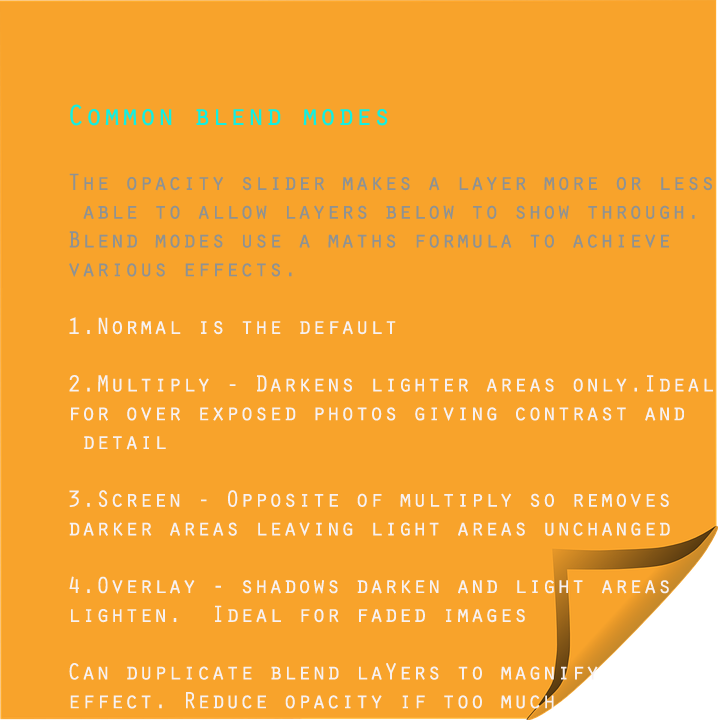
<style>
.page{position:relative;width:718px;height:720px;background:#f8a32b}
.page>*{position:absolute;margin:0}
.t1{font:24px "OratorStd";color:#f7f1f1}
.t2{font:30px "OratorStd";color:#12efe2}
.t3{font:24px "OratorStd";color:#8e9293}
</style>
<div class="page">
<p class="t1" style="left:69px;top:104px;width:644px;height:605px"><span class="t2">Common blend modes<br><br></span><span class="t3">The opacity slider makes a layer more or less<br> able to allow layers below to show through.<br>Blend modes use a maths formula to achieve<br>various effects. <br></span><br>1.Normal is the default<br><br>2.Multiply - Darkens lighter areas only.Ideal<br>for over exposed photos giving contrast and<br> detail <br><br>3.Screen - Opposite of multiply so removes<br>darker areas leaving light areas unchanged<br><br>4.Overlay - shadows darken and light areas<br>lighten.  Ideal for faded images<br><br>Can duplicate blend laYers to magnify<br>effect. Reduce opacity if too much</p>
</div>
